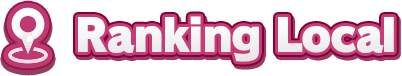
<style>
.page{position:relative;width:402px;height:76px;background:#ffffff}
.page>*{position:absolute;margin:0}
.t1{font:45.3px "RodinPro-UB";letter-spacing:-0.043em;color:#f3f3f4}
</style>
<div class="page">
<p class="t1" style="left:78px;top:16px;width:316px;height:46px">Ranking Local</p>
</div>
